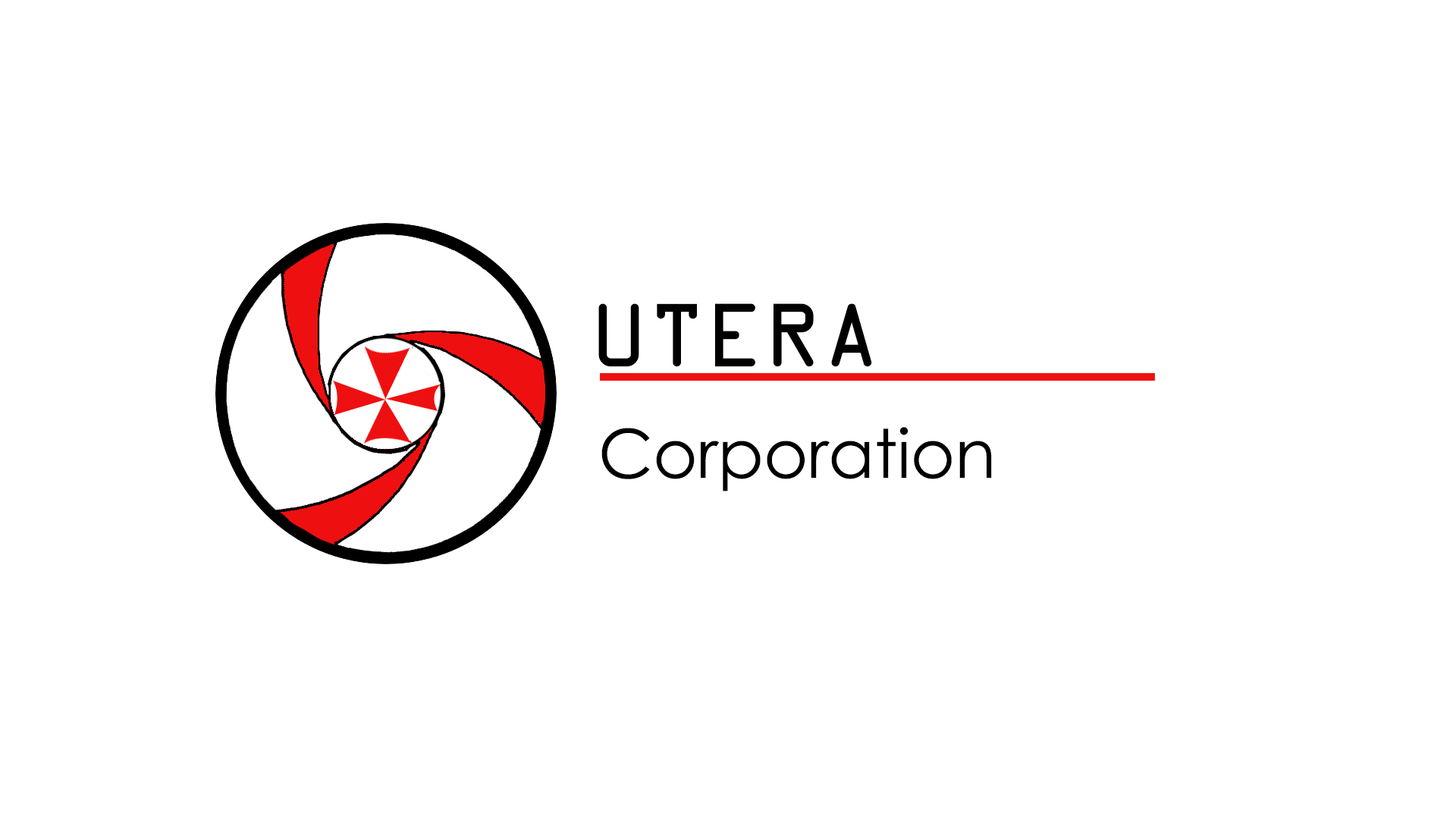
<style>
.page{position:relative;width:1456px;height:819px;background:#ffffff}
.page>*{position:absolute;margin:0}
.t1{font:96.3px "OCRAExtended";color:#000000}
.t2{font:67.5px "CenturyGothic";color:#000000}
</style>
<div class="page">
<p class="t1" style="left:598px;top:303px;width:274px;height:64px">UTERA</p>
<p class="t2" style="left:601px;top:427px;width:391px;height:64px">Corporation</p>
</div>
